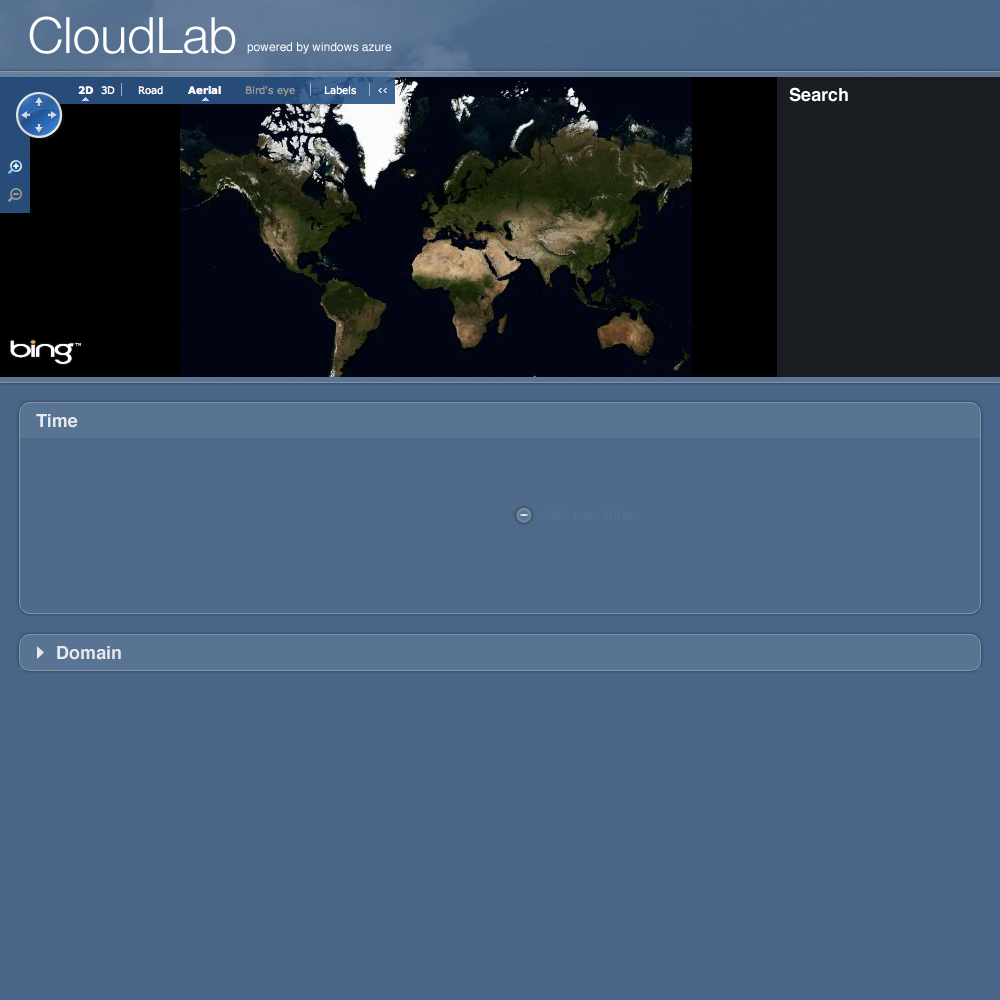
<style>
.page{position:relative;width:1000px;height:1000px;background:#496587}
.page>*{position:absolute;margin:0}
.t1{font:50px "HelveticaNeue-Light";color:#ffffff}
.t2{font:12px "Helvetica";color:#ffffff}
.t3{font:18px "Helvetica-Bold";color:#ffffff}
.t4{font:18px "Helvetica-Bold";color:#e5e9ee}
.t5{font:14px "Helvetica-Bold";color:#4f6a8b}
</style>
<div class="page">
<p class="t1" style="left:29px;top:16px;width:207px;height:38px">CloudLab</p>
<p class="t2" style="left:247px;top:42px;width:145px;height:12px">powered by windows azure</p>
<p class="t3" style="left:789px;top:87px;width:59px;height:15px">Search</p>
<p class="t4" style="left:36px;top:414px;width:42px;height:14px">Time</p>
<p class="t5" style="left:542px;top:509px;width:93px;height:12px">Add new filter</p>
<p class="t4" style="left:57px;top:646px;width:64px;height:14px">Domain</p>
</div>
